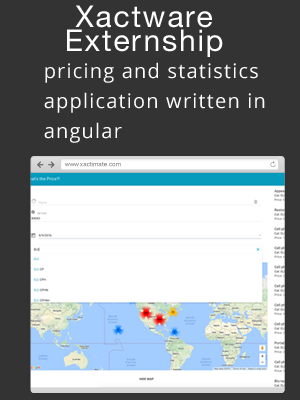
<style>
.page{position:relative;width:300px;height:400px;background:#333333}
.page>*{position:absolute;margin:0}
.t1{font:30px/24px "HelveticaNeue";letter-spacing:0.06em;color:#ffffff}
.t2{font:20px/30px "OpenSans";letter-spacing:0.06em;color:#ffffff}
.t3{font:6.3px "ArialMT"}
</style>
<div class="page">
<p class="t1" style="left:67px;top:5px;width:156px;height:52px;text-align:center">Xactware<br>Externship</p>
<p class="t2" style="left:44px;top:62px;width:221px;height:81px">pricing and statistics application written in angular</p>
<p class="t3" style="left:64px;top:161px;width:57px;height:6px">www.xactimate.com</p>
</div>
